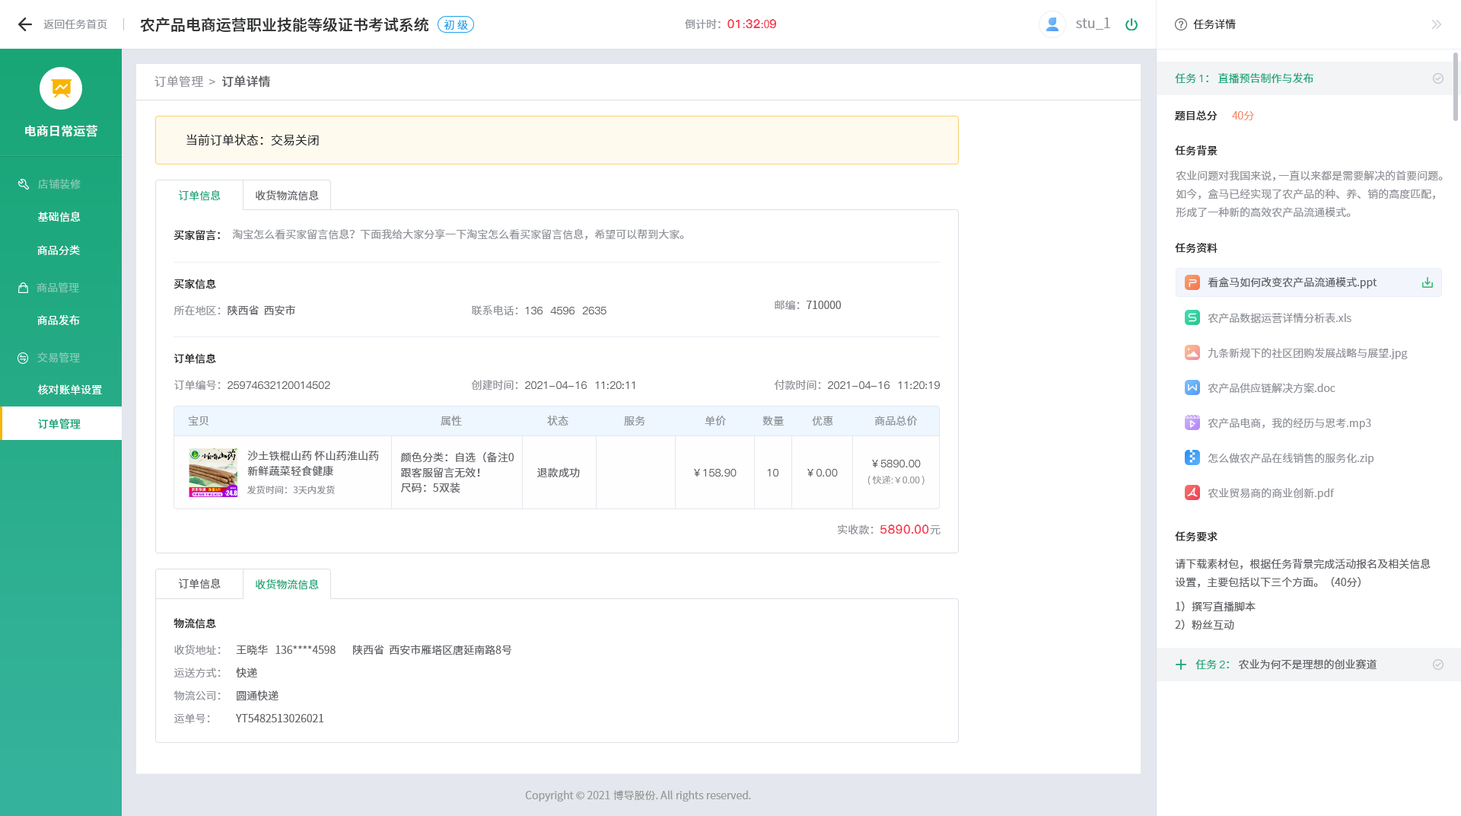
<style>
.page{position:relative;width:1461px;height:816px;background:#ffffff}
.page>*{position:absolute;margin:0}
.t1{font:15.2px "SourceHanSansCN-Medium";color:#303133}
.t2{font:13.7px "SourceHanSansCN-Normal";color:#909399}
.t3{font:10.7px "SourceHanSansCN-Normal";color:#909399}
.t4{font:10.7px "SourceHanSansCN-Normal";color:#1da0ea}
.t5{font:12.2px "PingFang-SC-Heavy";color:#f63f52}
.t6{font:10.7px "SourceHanSansCN-Normal";color:#f63f52}
.t7{font:10.7px "SourceHanSansCN-Normal";color:#303133}
.t8{font:12.2px "SourceHanSansCN-Normal";letter-spacing:0.01em;color:#909399}
.t9{font:12.2px "SourceHanSansCN-Medium";letter-spacing:0.01em;color:#606266}
.t10{font:10.7px "SourceHanSansCN-Normal";color:#19a677}
.t11{font:10.7px "PingFang-SC-Medium";color:#19a677}
.t12{font:10.7px "SourceHanSansCN-Medium";color:#303133}
.t13{font:10.7px "SourceHanSansCN-Light";color:#f67d53}
.t14{font:12.2px "SourceHanSansCN-Medium";letter-spacing:0.01em;color:#ffffff}
.t15{font:12.2px "SourceHanSansCN-Normal";color:#303133}
.t16{font:10.7px/18.3px "SourceHanSansCN-Normal";color:#909399}
.t17{font:10.7px "SourceHanSansCN-Regular";letter-spacing:0.01em;color:#81c8b0}
.t18{font:10.7px "SourceHanSansSC-Normal";color:#1aa678}
.t19{font:10.7px "SourceHanSansSC-Normal";color:#606266}
.t20{font:10.7px "SourceHanSansCN-Normal";letter-spacing:0.01em;color:#ffffff}
.t21{font:10.7px "SourceHanSansSC-Medium";color:#303133}
.t22{font:10.7px "SourceHanSansSC-Normal";color:#909399}
.t23{font:10.7px "SourceHanSansCN-Normal";color:#606266}
.t24{font:10.7px "SourceHanSansCN-Regular";letter-spacing:0.01em;color:#82cab3}
.t25{font:10.7px "PingFang-SC-Medium";color:#606266}
.t26{font:10.7px "SourceHanSansCN-Regular";letter-spacing:0.01em;color:#ffffff}
.t27{font:10.7px "SourceHanSansCN-Regular";letter-spacing:0.01em;color:#83cbb5}
.t28{font:10.7px "SourceHanSansCN-Medium";letter-spacing:0.01em;color:#19a677}
.t29{font:10.7px "SourceHanSansCN-Normal";letter-spacing:0.01em;color:#909399}
.t30{font:10.7px/15.2px "SourceHanSansCN-Normal";letter-spacing:0.01em;color:#606266}
.t31{font:10.7px "PingFang-SC-Medium";letter-spacing:0.01em;color:#606266}
.t32{font:10.7px "SourceHanSansCN-Normal";letter-spacing:0.01em;color:#606266}
.t33{font:9.1px "SourceHanSansCN-Normal";letter-spacing:0.01em;color:#909399}
.t34{font:9.1px "SourceHanSansCN-Light";letter-spacing:0.01em;color:#909399}
.t35{font:12.2px "PingFang-SC-Bold";letter-spacing:0.01em;color:#f63f52}
.t36{font:10.7px/18.3px "SourceHanSansCN-Normal";color:#606266}
.t37{font:10.7px "SourceHanSansSC-Normal";color:#19a677}
.t38{font:10.7px/22.8px "SourceHanSansSC-Normal";color:#909399}
.t39{font:10.7px/22.8px "SourceHanSansSC-Normal";color:#606266}
.t40{font:10.7px "PingFang-SC-Medium";color:#1aa678}
.t41{font:10.7px "SourceHanSansCN-Normal";color:#1aa678}
.t42{font:10.7px "SourceHanSansCN-Normal";color:#999999}
</style>
<div class="page">
<p class="t1" style="left:140px;top:17px;width:289px;height:15px">农产品电商运营职业技能等级证书考试系统</p>
<p class="t2" style="left:1076px;top:18px;width:35px;height:12px">stu_1</p>
<p class="t3" style="left:43px;top:19px;width:64px;height:11px">返回任务首页</p>
<p class="t4" style="left:444px;top:20px;width:24px;height:10px">初 级</p>
<p class="t3" style="left:685px;top:19px;width:91px;height:11px">倒计时：<span class="t5">01</span><span class="t6">:</span><span class="t5">32</span><span class="t6">:0</span><span class="t5">9</span></p>
<p class="t7" style="left:1193px;top:19px;width:43px;height:11px">任务详情</p>
<p class="t8" style="left:155px;top:75px;width:115px;height:13px">订单管理  &gt;<span class="t9">  订单详情</span></p>
<p class="t10" style="left:1175px;top:72px;width:139px;height:12px">任务 <span class="t11">1</span>： 直播预告制作与发布</p>
<p class="t12" style="left:1175px;top:110px;width:43px;height:11px">题目总分</p>
<p class="t13" style="left:1232px;top:111px;width:22px;height:9px">40分</p>
<p class="t14" style="left:25px;top:125px;width:72px;height:12px">电商日常运营</p>
<p class="t15" style="left:186px;top:134px;width:133px;height:12px">当前订单状态：交易关闭</p>
<p class="t12" style="left:1175px;top:145px;width:43px;height:11px">任务背景</p>
<p class="t16" style="left:1176px;top:170px;width:267px;height:48px">农业问题对我国来说，一直以来都是需要解决的首要问题。如今，盒马已经实现了农产品的种、养、销的高度匹配，形成了一种新的高效农产品流通模式。</p>
<p class="t17" style="left:38px;top:179px;width:43px;height:11px">店铺装修</p>
<p class="t18" style="left:178px;top:190px;width:43px;height:11px">订单信息</p>
<p class="t19" style="left:256px;top:190px;width:63px;height:11px">收货物流信息</p>
<p class="t20" style="left:38px;top:211px;width:43px;height:11px">基础信息</p>
<p class="t21" style="left:174px;top:230px;width:46px;height:11px">买家留言：</p>
<p class="t22" style="left:232px;top:228px;width:452px;height:12px">淘宝怎么看买家留言信息？下面我给大家分享一下淘宝怎么看买家留言信息，希望可以帮到大家。</p>
<p class="t20" style="left:37px;top:245px;width:43px;height:10px">商品分类</p>
<p class="t12" style="left:1175px;top:242px;width:43px;height:11px">任务资料</p>
<p class="t21" style="left:174px;top:279px;width:42px;height:10px">买家信息</p>
<p class="t23" style="left:1208px;top:277px;width:170px;height:11px">看盒马如何改变农产品流通模式.ppt</p>
<p class="t24" style="left:37px;top:282px;width:42px;height:11px">商品管理</p>
<p class="t19" style="left:174px;top:304px;width:121px;height:12px"><span class="t22">所在地区：</span>陕西省  西安市</p>
<p class="t25" style="left:472px;top:305px;width:135px;height:11px"><span class="t22">联系电话：</span>136  4596  2635</p>
<p class="t19" style="left:775px;top:300px;width:66px;height:10px"><span class="t22">邮编：</span>710000</p>
<p class="t26" style="left:37px;top:314px;width:43px;height:12px">商品发布</p>
<p class="t3" style="left:1208px;top:313px;width:144px;height:10px">农产品数据运营详情分析表.xls</p>
<p class="t27" style="left:37px;top:352px;width:43px;height:11px">交易管理</p>
<p class="t21" style="left:174px;top:353px;width:42px;height:11px">订单信息</p>
<p class="t3" style="left:1208px;top:347px;width:200px;height:12px">九条新规下的社区团购发展战略与展望.jpg</p>
<p class="t20" style="left:38px;top:384px;width:64px;height:11px">核对账单设置</p>
<p class="t25" style="left:174px;top:380px;width:156px;height:10px"><span class="t22">订单编号：</span>25974632120014502</p>
<p class="t25" style="left:471px;top:380px;width:164px;height:10px"><span class="t22">创建时间：</span>2021-04-16  11:20:11</p>
<p class="t25" style="left:775px;top:380px;width:165px;height:10px"><span class="t22">付款时间：</span>2021-04-16  11:20:19</p>
<p class="t3" style="left:1208px;top:383px;width:128px;height:11px">农产品供应链解决方案.doc</p>
<p class="t28" style="left:38px;top:418px;width:43px;height:11px">订单管理</p>
<p class="t29" style="left:188px;top:416px;width:21px;height:9px">宝贝</p>
<p class="t29" style="left:441px;top:416px;width:21px;height:10px">属性</p>
<p class="t29" style="left:547px;top:415px;width:22px;height:10px">状态</p>
<p class="t29" style="left:624px;top:416px;width:21px;height:9px">服务</p>
<p class="t29" style="left:705px;top:416px;width:21px;height:10px">单价</p>
<p class="t29" style="left:763px;top:416px;width:21px;height:9px">数量</p>
<p class="t29" style="left:812px;top:416px;width:21px;height:10px">优惠</p>
<p class="t29" style="left:875px;top:416px;width:43px;height:9px">商品总价</p>
<p class="t3" style="left:1208px;top:418px;width:164px;height:11px">农产品电商，我的经历与思考.mp3</p>
<p class="t30" style="left:247px;top:451px;width:132px;height:25px">沙土铁棍山药 怀山药淮山药新鲜蔬菜轻食健康</p>
<p class="t30" style="left:400px;top:452px;width:114px;height:41px">颜色分类：自选（备注0<br>跟客服留言无效！<br>尺码：5双装</p>
<p class="t31" style="left:872px;top:460px;width:49px;height:7px">￥5890.00</p>
<p class="t3" style="left:1209px;top:453px;width:166px;height:11px">怎么做农产品在线销售的服务化.zip</p>
<p class="t32" style="left:537px;top:467px;width:43px;height:11px">退款成功</p>
<p class="t31" style="left:694px;top:469px;width:43px;height:7px">￥158.90</p>
<p class="t31" style="left:767px;top:469px;width:12px;height:7px">10</p>
<p class="t31" style="left:808px;top:469px;width:30px;height:7px">￥0.00</p>
<p class="t33" style="left:247px;top:485px;width:88px;height:10px">发货时间：3天内发货</p>
<p class="t34" style="left:868px;top:476px;width:57px;height:9px">( 快递:￥0.00 )</p>
<p class="t3" style="left:1208px;top:488px;width:127px;height:11px">农业贸易商的商业创新.pdf</p>
<p class="t35" style="left:838px;top:524px;width:103px;height:10px"><span class="t29">实收款：</span>5890.00<span class="t29">元</span></p>
<p class="t12" style="left:1175px;top:531px;width:43px;height:11px">任务要求</p>
<p class="t36" style="left:1175px;top:558px;width:256px;height:72px">请下载素材包，根据任务背景完成活动报名及相关信息设置，主要包括以下三个方面。（40分）<br>1）撰写直播脚本<br>2）粉丝互动</p>
<p class="t19" style="left:178px;top:578px;width:43px;height:11px">订单信息</p>
<p class="t37" style="left:256px;top:578px;width:63px;height:12px">收货物流信息</p>
<p class="t21" style="left:174px;top:618px;width:42px;height:11px">物流信息</p>
<p class="t38" style="left:174px;top:645px;width:47px;height:79px">收货地址：<br>运送方式：<br>物流公司：<br>运单号：</p>
<p class="t39" style="left:236px;top:644px;width:276px;height:78px">王晓华   136****4598       陕西省  西安市雁塔区唐延南路8号<br>快递<br>圆通快递<br>YT5482513026021</p>
<p class="t23" style="left:1196px;top:659px;width:181px;height:11px"><span class="t10">任务 </span><span class="t40">2</span><span class="t41">：</span> 农业为何不是理想的创业赛道</p>
<p class="t42" style="left:525px;top:790px;width:226px;height:11px">Copyright © 2021 博导股份. All rights reserved.</p>
</div>
